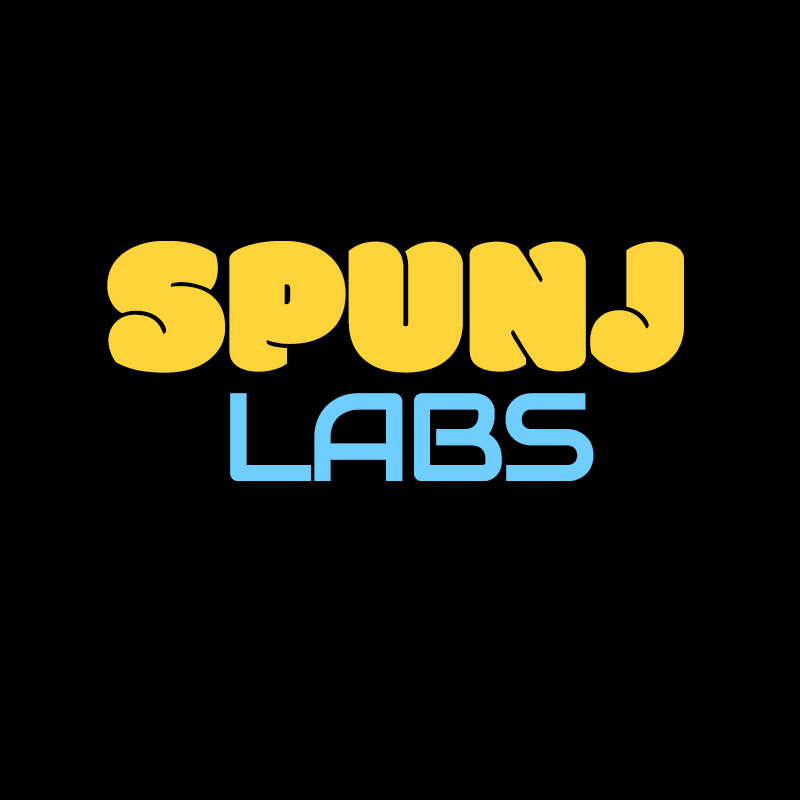
<style>
.page{position:relative;width:800px;height:800px;background:#000000}
.page>*{position:absolute;margin:0}
.t1{font:200px "Modak";color:#ffd43a;text-transform:uppercase}
.t2{font:125px "Audiowide-Regular";letter-spacing:-0.05em;color:#70ceff;text-transform:uppercase}
</style>
<div class="page">
<p class="t1" style="left:107px;top:241px;width:577px;height:132px">Spunj</p>
<p class="t2" style="left:230px;top:393px;width:364px;height:88px">Labs</p>
</div>
